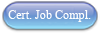
<style>
.page{position:relative;width:100px;height:33px}
.page>*{position:absolute;margin:0}
.t1{font:12.1px "TimesNewRomanPSMT";color:#fefefe}
</style>
<div class="page">
<p class="t1" style="left:8px;top:10px;width:83px;height:12px">Cert. Job Compl.</p>
</div>
